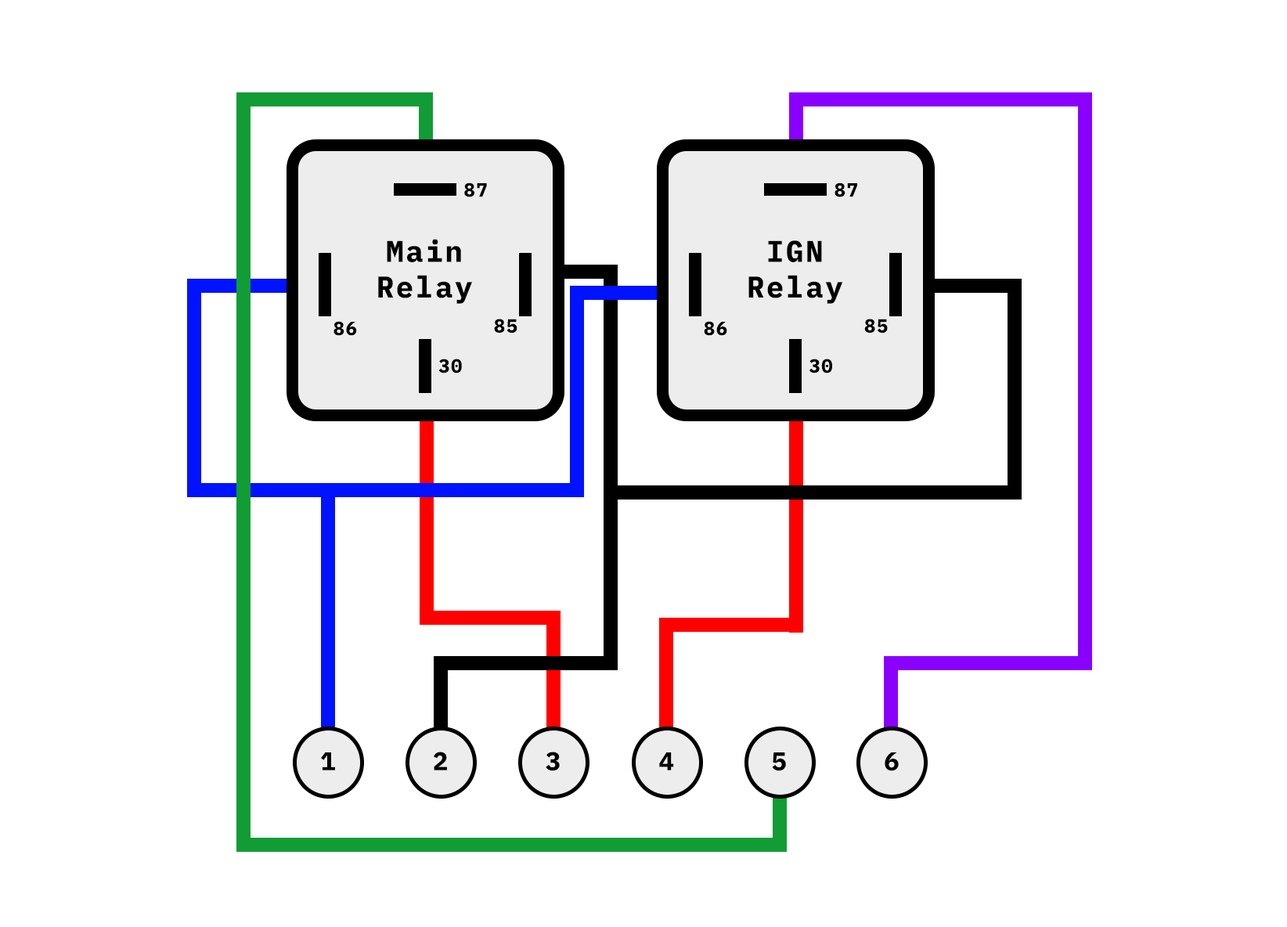
<style>
.page{position:relative;width:1287px;height:927px;background:#ffffff}
.page>*{position:absolute;margin:0}
.t1{font:18.9px "IBMPlexMono-Bold";letter-spacing:0.07em;color:#000000}
.t2{font:29.8px "IBMPlexMono-Bold";letter-spacing:0.07em;color:#000000}
.t3{font:25.5px "IBMPlexMono-Bold";letter-spacing:0.07em;color:#000000}
</style>
<div class="page">
<p class="t1" style="left:464px;top:182px;width:23px;height:15px">87</p>
<p class="t1" style="left:834px;top:182px;width:23px;height:15px">87</p>
<p class="t2" style="left:378px;top:239px;width:94px;height:65px;text-align:center">Main<br>Relay</p>
<p class="t2" style="left:748px;top:240px;width:95px;height:64px;text-align:center">IGN<br>Relay</p>
<p class="t1" style="left:333px;top:321px;width:24px;height:15px">86</p>
<p class="t1" style="left:494px;top:319px;width:23px;height:14px">85</p>
<p class="t1" style="left:704px;top:321px;width:23px;height:15px">86</p>
<p class="t1" style="left:864px;top:319px;width:24px;height:14px">85</p>
<p class="t1" style="left:438px;top:358px;width:24px;height:15px">30</p>
<p class="t1" style="left:809px;top:358px;width:23px;height:15px">30</p>
<p class="t3" style="left:321px;top:752px;width:14px;height:18px">1</p>
<p class="t3" style="left:434px;top:751px;width:13px;height:19px">2</p>
<p class="t3" style="left:546px;top:751px;width:14px;height:20px">3</p>
<p class="t3" style="left:659px;top:752px;width:15px;height:18px">4</p>
<p class="t3" style="left:772px;top:752px;width:14px;height:19px">5</p>
<p class="t3" style="left:884px;top:752px;width:15px;height:19px">6</p>
</div>
